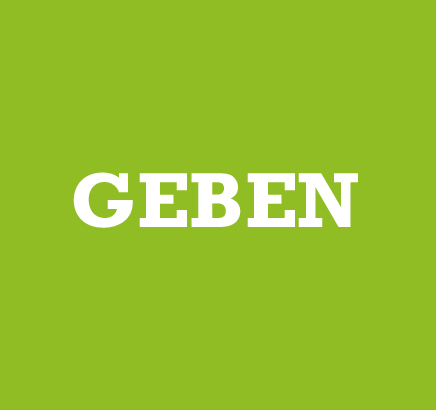
<style>
.page{position:relative;width:436px;height:411px;background:#90bd24}
.page>*{position:absolute;margin:0}
.t1{font:79px "RockwellStd-Bold";color:#ffffff}
</style>
<div class="page">
<p class="t1" style="left:73px;top:172px;width:285px;height:56px">GEBEN</p>
</div>
